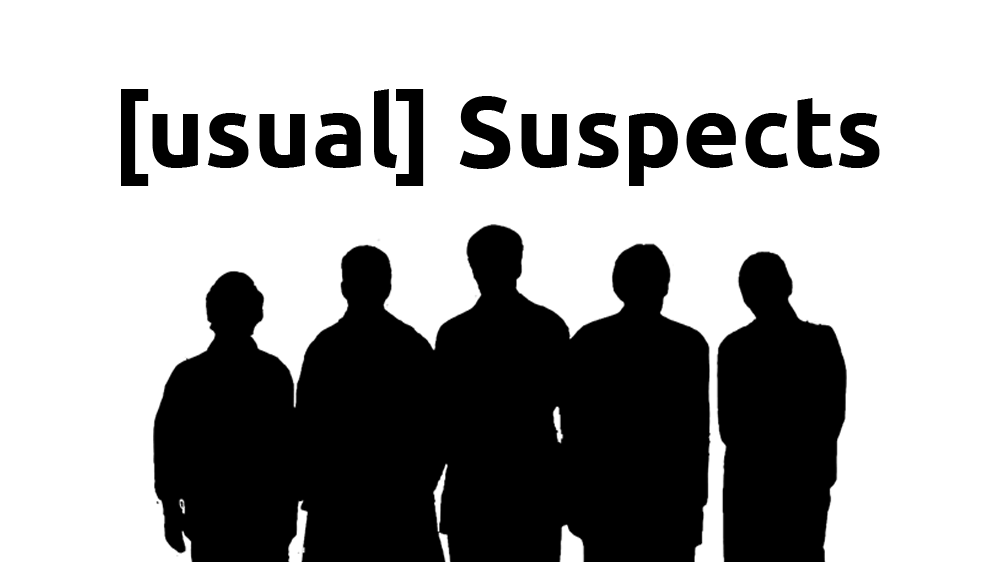
<style>
.page{position:relative;width:1000px;height:562px;background:#ffffff}
.page>*{position:absolute;margin:0}
.t1{font:100px "Ubuntu-Bold";color:#000000}
</style>
<div class="page">
<p class="t1" style="left:121px;top:89px;width:759px;height:97px">[usual] Suspects</p>
</div>
